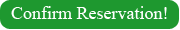
<style>
.page{position:relative;width:180px;height:30px;background:#1e982f}
.page>*{position:absolute;margin:0}
.t1{font:18px "TimesNewRomanPSMT";color:#ffffff}
</style>
<div class="page">
<p class="t1" style="left:11px;top:6px;width:156px;height:13px">Confirm Reservation!</p>
</div>
